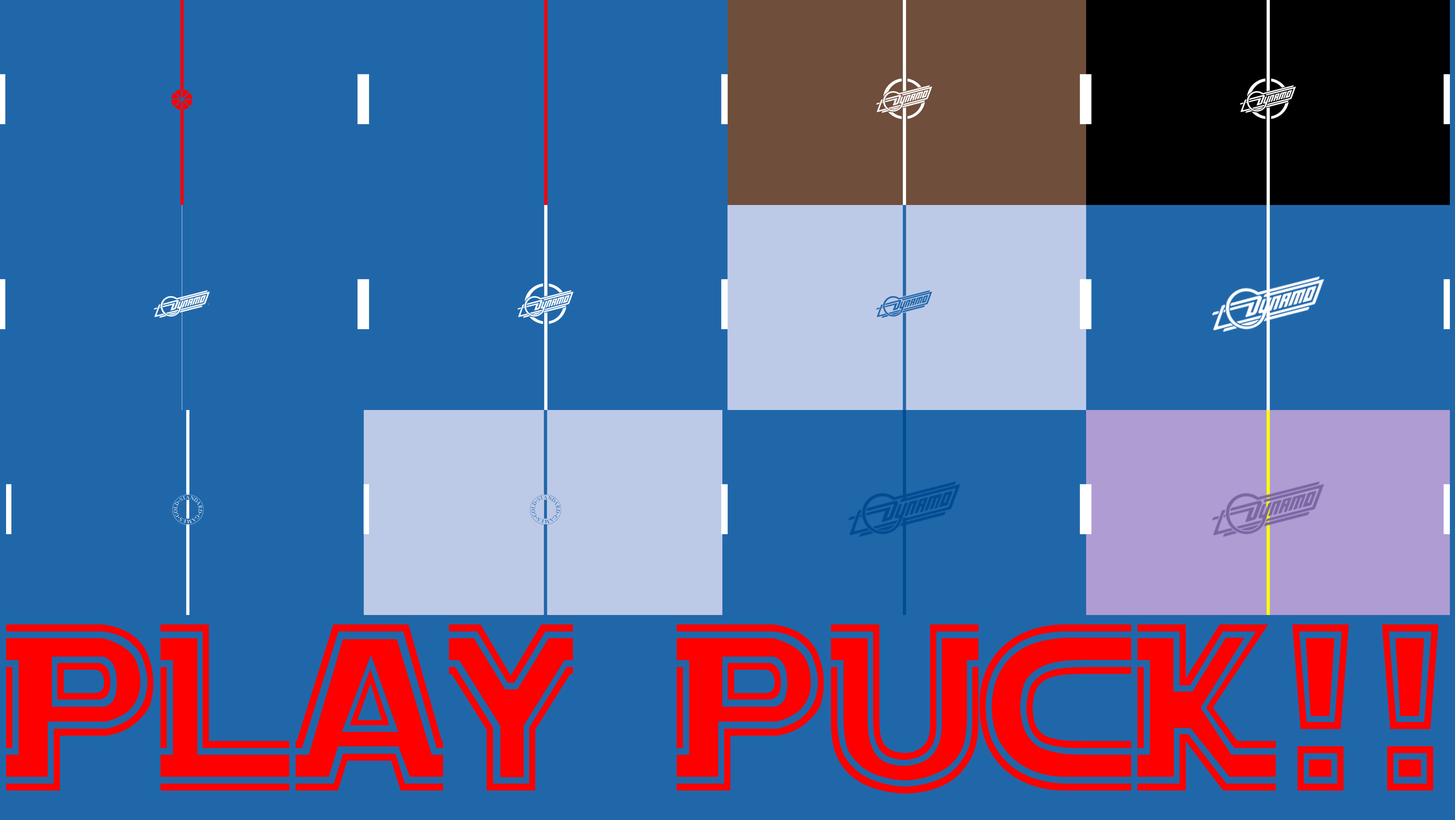
<style>
.page{position:relative;width:1455px;height:820px;background:#2067aa}
.page>*{position:absolute;margin:0}
.t1{font:235.4px "StarJediOutline";color:#ff0000;scale:0.89 1}
</style>
<div class="page">
<p class="t1" style="left:6px;top:624px;width:1433px;height:169px">PLAY PUCK!!</p>
</div>
